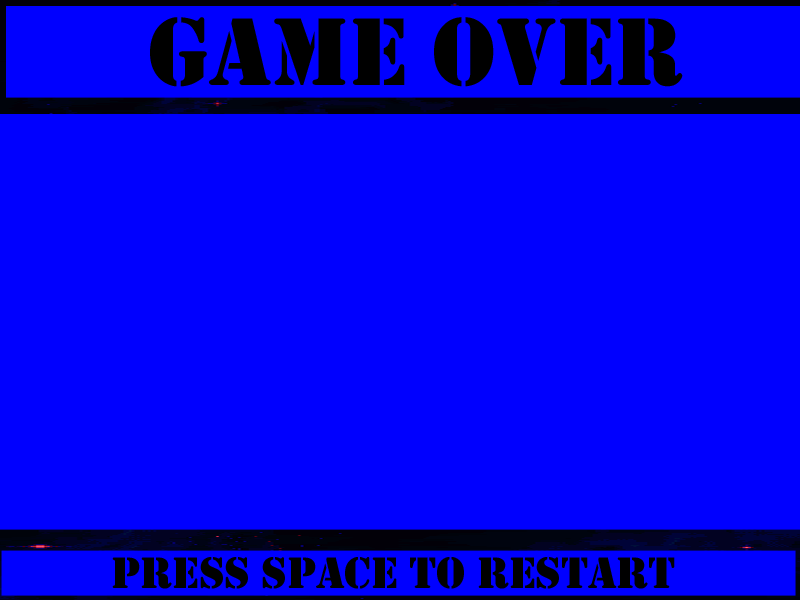
<style>
.page{position:relative;width:800px;height:600px;background:#0000ff}
.page>*{position:absolute;margin:0}
.t1{font:99.6px "Stencil";color:#000000}
.t2{font:45.7px "Stencil";color:#000000}
</style>
<div class="page">
<p class="t1" style="left:150px;top:17px;width:533px;height:70px">Game OVER</p>
<p class="t2" style="left:112px;top:557px;width:563px;height:32px">press Space to restart</p>
</div>
